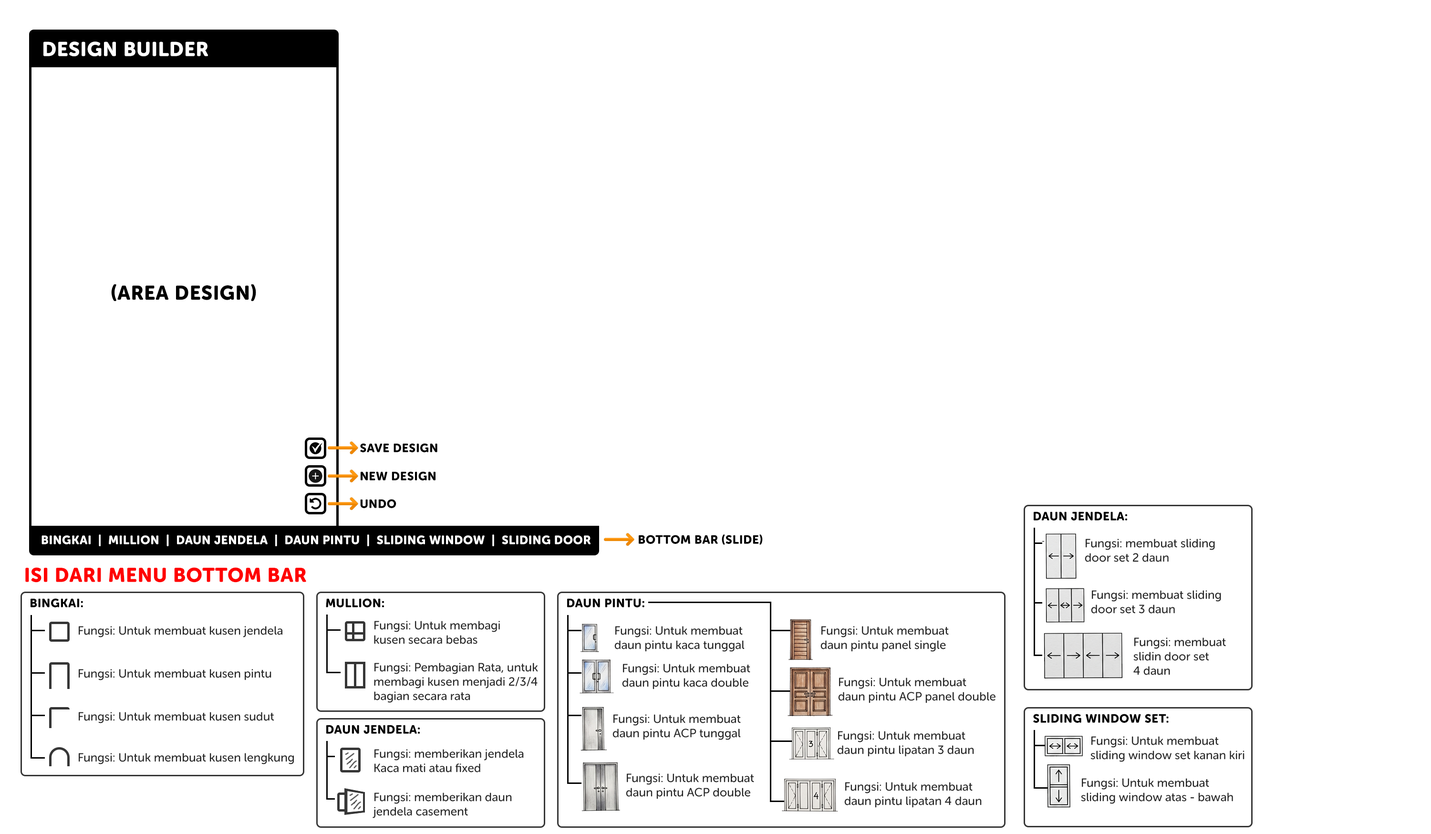
<style>
.page{position:relative;width:1431px;height:834px;background:#ffffff}
.page>*{position:absolute;margin:0}
.t1{font:19.9px "MuseoSansRounded-900";letter-spacing:0.025em;color:#ffffff;text-transform:uppercase}
.t2{font:19.9px "MuseoSansRounded-900";letter-spacing:0.025em;color:#000000;text-transform:uppercase}
.t3{font:11.9px "MuseoSansRounded-900";letter-spacing:0.025em;color:#000000;text-transform:uppercase}
.t4{font:11.9px "MuseoSansRounded-900";letter-spacing:0.025em;color:#ffffff;text-transform:uppercase}
.t5{font:11.9px "MuseoSansRounded-500";color:#262626}
.t6{font:19.9px "MuseoSansRounded-900";letter-spacing:0.025em;color:#ff0000;text-transform:uppercase}
</style>
<div class="page">
<p class="t1" style="left:43px;top:41px;width:165px;height:15px">DESIGN BUILDER</p>
<p class="t2" style="left:111px;top:284px;width:145px;height:17px">(Area Design)</p>
<p class="t3" style="left:360px;top:443px;width:77px;height:9px">save design</p>
<p class="t3" style="left:361px;top:471px;width:74px;height:9px">new design</p>
<p class="t3" style="left:360px;top:499px;width:36px;height:9px">undo</p>
<p class="t3" style="left:1033px;top:511px;width:94px;height:9px">daun jendela:</p>
<p class="t4" style="left:41px;top:534px;width:549px;height:12px">BINGKAI  |  Million  |  daun jendela  |  daun pintu  |  Sliding Window  |  Sliding door</p>
<p class="t3" style="left:639px;top:534px;width:123px;height:11px">bottom bar (slide)</p>
<p class="t5" style="left:1084px;top:538px;width:131px;height:24px">Fungsi: membuat sliding<br>door set 2 daun</p>
<p class="t6" style="left:25px;top:567px;width:281px;height:15px">isi dari menu bottom bar</p>
<p class="t5" style="left:1091px;top:590px;width:130px;height:23px">Fungsi: membuat sliding<br>door set 3 daun</p>
<p class="t3" style="left:31px;top:598px;width:52px;height:9px">bingkai:</p>
<p class="t3" style="left:326px;top:598px;width:58px;height:9px">mullion:</p>
<p class="t3" style="left:567px;top:598px;width:77px;height:9px">daun pintu:</p>
<p class="t5" style="left:79px;top:626px;width:203px;height:11px">Fungsi: Untuk membuat kusen jendela</p>
<p class="t5" style="left:374px;top:620px;width:126px;height:24px">Fungsi: Untuk membagi<br>kusen secara bebas</p>
<p class="t5" style="left:614px;top:626px;width:130px;height:25px">Fungsi: Untuk membuat<br>daun pintu kaca tunggal</p>
<p class="t5" style="left:820px;top:626px;width:128px;height:25px">Fungsi: Untuk membuat<br>daun pintu panel single</p>
<p class="t5" style="left:1133px;top:637px;width:93px;height:38px">Fungsi: membuat<br>slidin door set<br>4 daun</p>
<p class="t5" style="left:374px;top:662px;width:164px;height:40px">Fungsi: Pembagian Rata, untuk<br>membagi kusen menjadi 2/3/4<br>bagian secara rata</p>
<p class="t5" style="left:622px;top:663px;width:128px;height:26px">Fungsi: Untuk membuat<br>daun pintu kaca double</p>
<p class="t5" style="left:79px;top:669px;width:192px;height:11px">Fungsi: Untuk membuat kusen pintu</p>
<p class="t5" style="left:838px;top:677px;width:157px;height:26px">Fungsi: Untuk membuat<br>daun pintu ACP panel double</p>
<p class="t5" style="left:79px;top:711px;width:195px;height:12px">Fungsi: Untuk membuat kusen sudut</p>
<p class="t5" style="left:612px;top:714px;width:129px;height:26px">Fungsi: Untuk membuat <br>daun pintu ACP tunggal</p>
<p class="t3" style="left:1033px;top:713px;width:135px;height:9px">sliding window set:</p>
<p class="t3" style="left:326px;top:724px;width:94px;height:9px">daun jendela:</p>
<p class="t5" style="left:837px;top:731px;width:137px;height:25px">Fungsi: Untuk membuat <br>daun pintu lipatan 3 daun</p>
<p class="t5" style="left:1090px;top:736px;width:154px;height:26px">Fungsi: Untuk membuat<br>sliding window set kanan kiri</p>
<p class="t5" style="left:374px;top:749px;width:150px;height:23px">Fungsi: memberikan jendela<br>Kaca mati atau fixed</p>
<p class="t5" style="left:79px;top:752px;width:215px;height:12px">Fungsi: Untuk membuat kusen lengkung</p>
<p class="t5" style="left:626px;top:773px;width:128px;height:26px">Fungsi: Untuk membuat<br>daun pintu ACP double</p>
<p class="t5" style="left:844px;top:782px;width:137px;height:25px">Fungsi: Untuk membuat<br>daun pintu lipatan 4 daun</p>
<p class="t5" style="left:1081px;top:778px;width:152px;height:25px">Fungsi: Untuk membuat<br>sliding window atas - bawah</p>
<p class="t5" style="left:372px;top:792px;width:140px;height:26px">Fungsi: memberikan daun <br>jendela casement</p>
</div>
